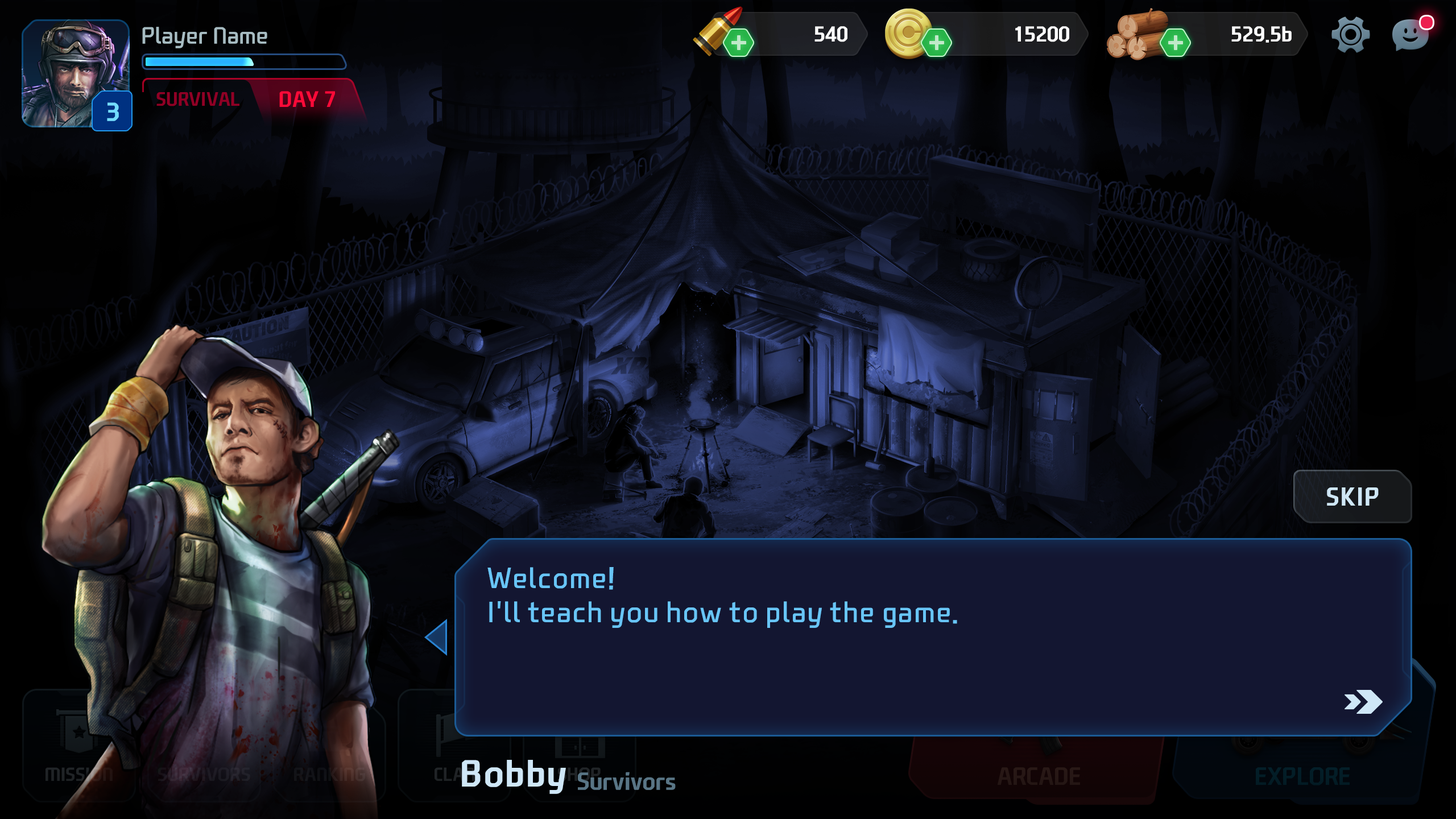
<style>
.page{position:relative;width:1456px;height:819px}
.page>*{position:absolute;margin:0}
.t1{font:22.7px "NEXONFootballGothicL";color:#a7bcc2}
.t2{font:20.7px "NEXONFootballGothicB";color:#ffffff;text-transform:uppercase}
.t3{font:20.7px "NEXONFootballGothicB";color:#ffffff}
.t4{font:18.8px "NEXONFootballGothicB";color:#900025;text-transform:uppercase}
.t5{font:21.6px "NEXONFootballGothicB";color:#ff0a38;text-transform:uppercase}
.t6{font:25px "NEXONFootballGothicB";color:#73dcff}
.t7{font:25px "NEXONFootballGothicB";color:#cfe7f7;text-transform:uppercase}
.t8{font:28.4px "NEXONFootballGothicL";color:#68c5f7}
.t9{font:36.4px "NEXONFootballGothicB";color:#cfe7f7}
.t10{font:18.2px "NEXONFootballGothicB";color:#202326;text-transform:uppercase}
.t11{font:18.2px "NEXONFootballGothicB";color:#221e27;text-transform:uppercase}
.t12{font:18.2px "NEXONFootballGothicB";text-transform:uppercase}
.t13{font:23.9px "NEXONFootballGothicB";color:#597585}
.t14{font:24px "NEXONFootballGothicB";color:#261715;text-transform:uppercase}
.t15{font:24px "NEXONFootballGothicB";color:#031d27;text-transform:uppercase}
</style>
<div class="page">
<p class="t1" style="left:142px;top:27px;width:125px;height:21px">Player Name</p>
<p class="t2" style="left:814px;top:26px;width:33px;height:16px">540</p>
<p class="t2" style="left:1015px;top:26px;width:54px;height:16px">15200</p>
<p class="t3" style="left:1231px;top:26px;width:61px;height:17px">529.5b</p>
<p class="t4" style="left:156px;top:92px;width:83px;height:14px">Survival</p>
<p class="t5" style="left:279px;top:91px;width:56px;height:16px">Day 7</p>
<p class="t6" style="left:107px;top:102px;width:12px;height:19px">3</p>
<p class="t7" style="left:1327px;top:487px;width:52px;height:19px">Skip</p>
<p class="t8" style="left:487px;top:567px;width:470px;height:61px">Welcome!<br>I'll teach you how to play the game.</p>
<p class="t9" style="left:462px;top:760px;width:104px;height:34px">Bobby</p>
<p class="t10" style="left:45px;top:767px;width:68px;height:14px">mission</p>
<p class="t11" style="left:158px;top:767px;width:92px;height:14px">SURVIVORS</p>
<p class="t12" style="left:294px;top:767px;width:71px;height:14px">Ranking</p>
<p class="t13" style="left:578px;top:772px;width:98px;height:18px">Survivors</p>
<p class="t14" style="left:997px;top:767px;width:83px;height:18px">Arcade</p>
<p class="t15" style="left:1256px;top:767px;width:94px;height:18px">EXPLORE</p>
</div>
